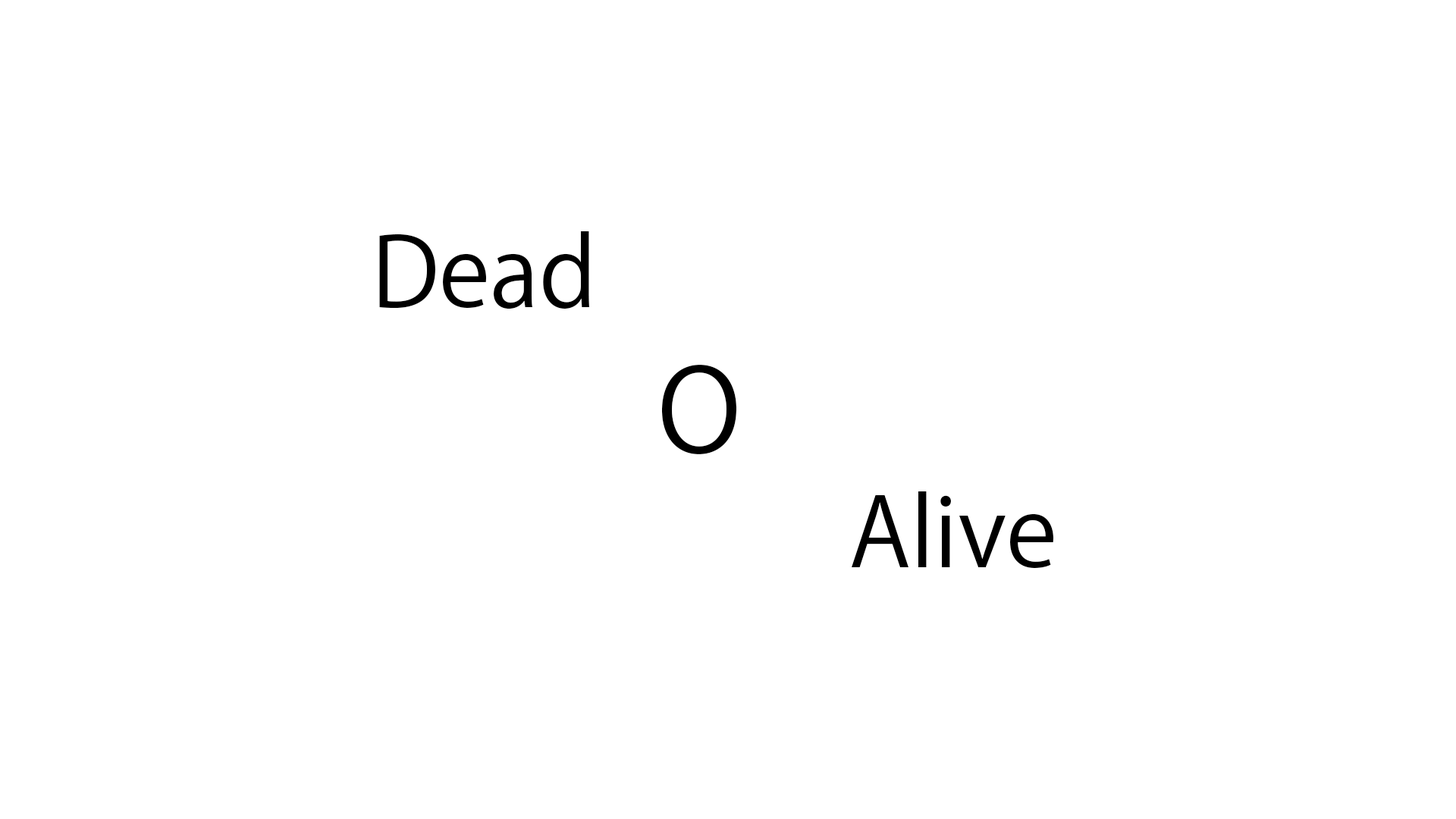
<style>
.page{position:relative;width:1456px;height:819px;background:#ffffff}
.page>*{position:absolute;margin:0}
.t1{font:94.8px "KozGoPr6N-Regular";color:#000000}
.t2{font:113.7px "KozGoPr6N-Regular";color:#000000}
</style>
<div class="page">
<p class="t1" style="left:379px;top:231px;width:210px;height:78px">Dead</p>
<p class="t2" style="left:662px;top:365px;width:74px;height:89px">O</p>
<p class="t1" style="left:852px;top:491px;width:201px;height:77px">Alive</p>
</div>
